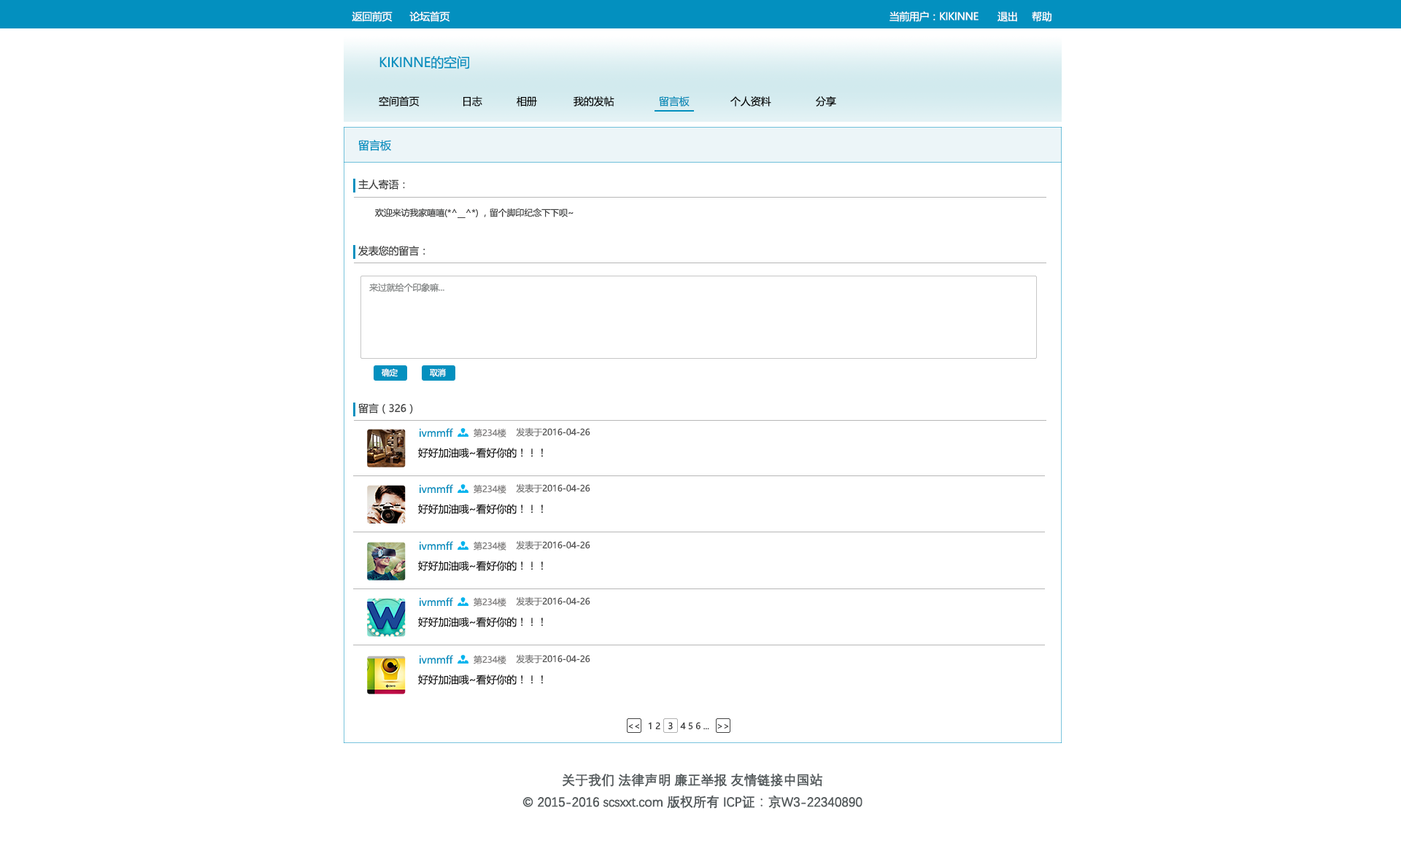
<style>
.page{position:relative;width:1401px;height:851px;background:#ffffff}
.page>*{position:absolute;margin:0}
.t1{font:10.2px "MicrosoftYaHei";letter-spacing:-0.025em;color:#ffffff}
.t2{font:13.1px "MicrosoftYaHei";letter-spacing:-0.01em;color:#0390bf}
.t3{font:10.2px "MicrosoftYaHei";letter-spacing:-0.01em;color:#111111}
.t4{font:10.2px "MicrosoftYaHei";letter-spacing:-0.01em;color:#040404}
.t5{font:10.2px "MicrosoftYaHei";letter-spacing:-0.01em;color:#068cb8}
.t6{font:11.1px "MicrosoftYaHei";letter-spacing:-0.01em;color:#0390bf}
.t7{font:10.2px "MicrosoftYaHei";letter-spacing:-0.01em;color:#404141}
.t8{font:8.8px "MicrosoftYaHei";letter-spacing:-0.01em;color:#404141}
.t9{font:8.8px "MicrosoftYaHei";letter-spacing:-0.01em;color:#818484}
.t10{font:8.1px "MicrosoftYaHei";letter-spacing:-0.01em;color:#ffffff}
.t11{font:10.2px "MicrosoftYaHei";letter-spacing:-0.01em;color:#0390bf}
.t12{font:8.8px "MicrosoftYaHei";letter-spacing:-0.01em;color:#7f7d7d}
.t13{font:8.8px "MicrosoftYaHei";letter-spacing:-0.01em;color:#535353}
.t14{font:8.8px "MicrosoftYaHei";letter-spacing:-0.01em;color:#7a7a7a}
.t15{font:10.2px "MicrosoftYaHei";letter-spacing:-0.01em;color:#1a1a1a}
.t16{font:8.8px "MicrosoftYaHei";letter-spacing:-0.01em;color:#38393a}
.t17{font:8.8px "MicrosoftYaHei";letter-spacing:-0.01em;color:#252626}
.t18{font:13.1px/21.9px "DengXian-Regular";letter-spacing:-0.025em;color:#545a5c;font-weight:bold}
</style>
<div class="page">
<p class="t1" style="left:352px;top:11px;width:40px;height:11px">返回前页</p>
<p class="t1" style="left:409px;top:11px;width:41px;height:11px">论坛首页</p>
<p class="t1" style="left:889px;top:11px;width:89px;height:11px">当前用户：KIKINNE</p>
<p class="t1" style="left:997px;top:12px;width:20px;height:10px">退出</p>
<p class="t1" style="left:1032px;top:11px;width:19px;height:11px">帮助</p>
<p class="t2" style="left:379px;top:55px;width:90px;height:14px">KIKINNE的空间</p>
<p class="t3" style="left:379px;top:96px;width:40px;height:11px">空间首页</p>
<p class="t4" style="left:463px;top:96px;width:19px;height:11px">日志</p>
<p class="t4" style="left:516px;top:96px;width:21px;height:11px">相册</p>
<p class="t4" style="left:573px;top:96px;width:41px;height:11px">我的发帖</p>
<p class="t5" style="left:659px;top:96px;width:30px;height:11px">留言板</p>
<p class="t4" style="left:730px;top:96px;width:41px;height:11px">个人资料</p>
<p class="t4" style="left:816px;top:96px;width:20px;height:11px">分享</p>
<p class="t6" style="left:358px;top:139px;width:33px;height:12px">留言板</p>
<p class="t7" style="left:358px;top:179px;width:47px;height:11px">主人寄语：</p>
<p class="t8" style="left:375px;top:208px;width:198px;height:10px">欢迎来访我家嘻嘻(*^__^*) ，留个脚印纪念下下呗~</p>
<p class="t7" style="left:358px;top:246px;width:67px;height:10px">发表您的留言：</p>
<p class="t9" style="left:369px;top:283px;width:75px;height:10px">来过就给个印象嘛...</p>
<p class="t10" style="left:382px;top:368px;width:16px;height:9px">确定</p>
<p class="t10" style="left:430px;top:368px;width:16px;height:9px">取消</p>
<p class="t7" style="left:358px;top:403px;width:55px;height:11px">留言（326）</p>
<p class="t11" style="left:419px;top:428px;width:34px;height:9px">ivmmff</p>
<p class="t12" style="left:473px;top:428px;width:33px;height:10px">第234楼</p>
<p class="t13" style="left:516px;top:427px;width:74px;height:10px"><span class="t14"> 发表于</span>2016-04-26</p>
<p class="t15" style="left:418px;top:448px;width:125px;height:10px">好好加油哦~看好你的！！！</p>
<p class="t11" style="left:419px;top:484px;width:34px;height:9px">ivmmff</p>
<p class="t12" style="left:473px;top:484px;width:33px;height:10px">第234楼</p>
<p class="t13" style="left:516px;top:484px;width:74px;height:9px"><span class="t14"> 发表于</span>2016-04-26</p>
<p class="t15" style="left:418px;top:504px;width:125px;height:10px">好好加油哦~看好你的！！！</p>
<p class="t11" style="left:419px;top:541px;width:34px;height:9px">ivmmff</p>
<p class="t12" style="left:473px;top:541px;width:33px;height:10px">第234楼</p>
<p class="t13" style="left:516px;top:541px;width:74px;height:9px"><span class="t14"> 发表于</span>2016-04-26</p>
<p class="t15" style="left:418px;top:561px;width:125px;height:10px">好好加油哦~看好你的！！！</p>
<p class="t11" style="left:419px;top:597px;width:34px;height:9px">ivmmff</p>
<p class="t12" style="left:473px;top:597px;width:33px;height:10px">第234楼</p>
<p class="t13" style="left:516px;top:597px;width:74px;height:9px"><span class="t14"> 发表于</span>2016-04-26</p>
<p class="t15" style="left:418px;top:617px;width:125px;height:10px">好好加油哦~看好你的！！！</p>
<p class="t11" style="left:419px;top:655px;width:34px;height:9px">ivmmff</p>
<p class="t12" style="left:473px;top:655px;width:33px;height:10px">第234楼</p>
<p class="t13" style="left:516px;top:654px;width:74px;height:10px"><span class="t14"> 发表于</span>2016-04-26</p>
<p class="t15" style="left:418px;top:675px;width:125px;height:10px">好好加油哦~看好你的！！！</p>
<p class="t16" style="left:628px;top:722px;width:101px;height:8px">&lt;&lt;   1 2 <span class="t17">  3 </span>  4 5 6 ...   &gt;&gt;</p>
<p class="t18" style="left:522px;top:773px;width:340px;height:36px;text-align:center">关于我们 法律声明 廉正举报 友情链接中国站<br>© 2015-2016 scsxxt.com 版权所有 ICP证：京W3-22340890</p>
</div>
